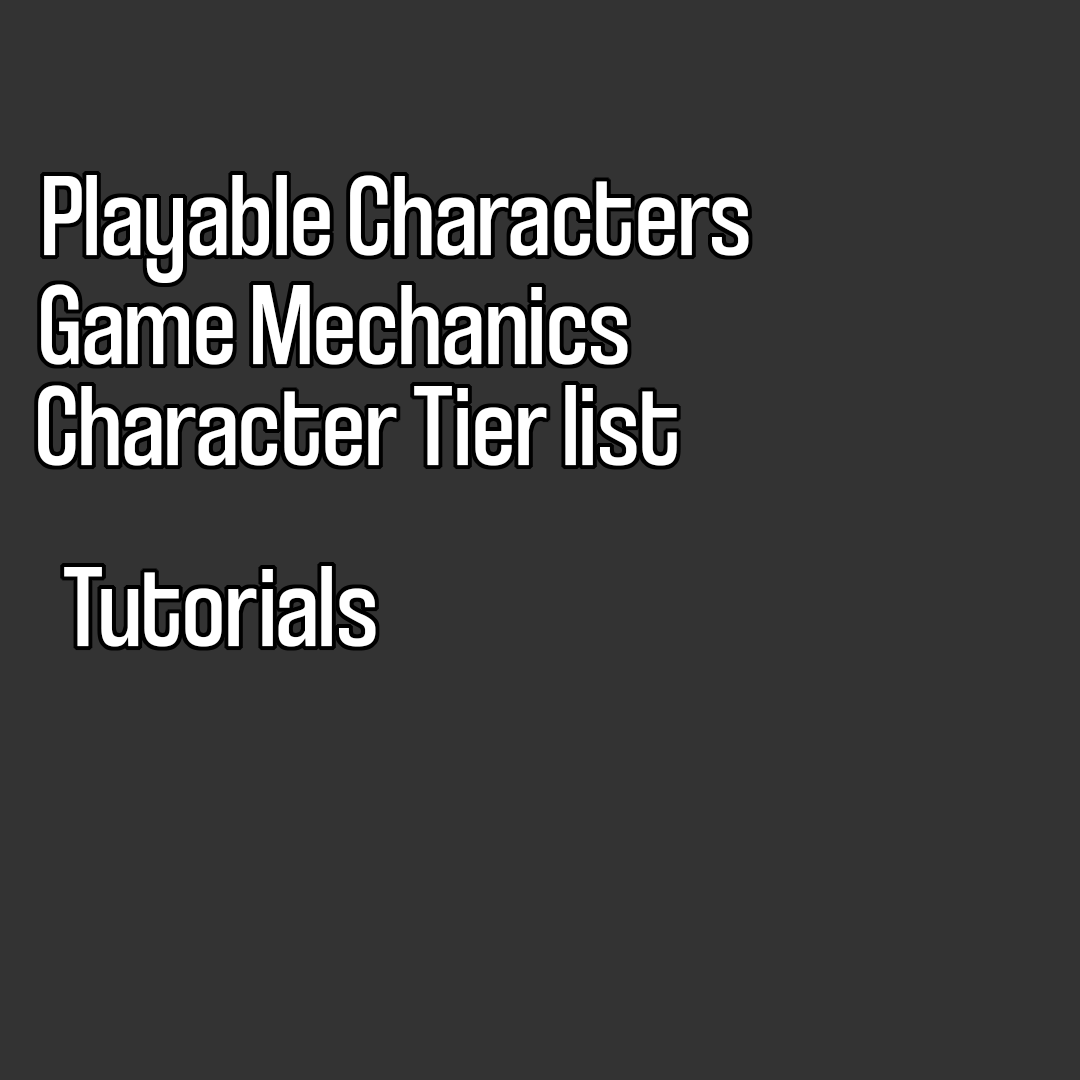
<style>
.page{position:relative;width:1080px;height:1080px;background:#333333}
.page>*{position:absolute;margin:0}
.t1{font:120px "CoolveticaCondensedRg-Regular";color:#ffffff}
</style>
<div class="page">
<p class="t1" style="left:44px;top:175px;width:705px;height:108px">Playable Characters</p>
<p class="t1" style="left:41px;top:284px;width:587px;height:81px">Game Mechanics</p>
<p class="t1" style="left:38px;top:385px;width:639px;height:81px">Character Tier list</p>
<p class="t1" style="left:64px;top:566px;width:312px;height:81px">Tutorials</p>
</div>
